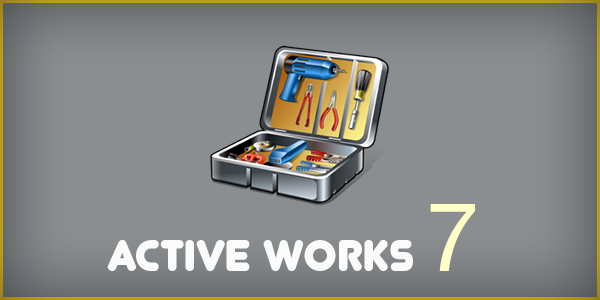
<style>
.page{position:relative;width:600px;height:300px;background:#8a8e91}
.page>*{position:absolute;margin:0}
.t1{font:96.5px "HelveticaNeueCyr-Roman";color:#ffffc6}
.t2{font:43.6px "Junegull-Regular";color:#fbfbfb;text-transform:uppercase}
</style>
<div class="page">
<p class="t1" style="left:430px;top:204px;width:45px;height:67px">7</p>
<p class="t2" style="left:107px;top:240px;width:306px;height:31px">Active Works</p>
</div>
